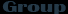
<style>
.page{position:relative;width:68px;height:14px;background:#000000}
.page>*{position:absolute;margin:0}
.t1{font:16px "BritannicBold";color:#253947;scale:1.47 1}
</style>
<div class="page">
<p class="t1" style="left:2px;top:1px;width:64px;height:14px">Group</p>
</div>
